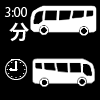
<style>
.page{position:relative;width:100px;height:100px;background:#000000}
.page>*{position:absolute;margin:0}
.t1{font:12px "KozGoPr6N-Regular";color:#ffffff}
.t2{font:20px "KozGoPr6N-Bold";color:#ffffff}
</style>
<div class="page">
<p class="t1" style="left:4px;top:7px;width:23px;height:10px">3:00</p>
<p class="t2" style="left:9px;top:22px;width:20px;height:20px">分</p>
</div>
